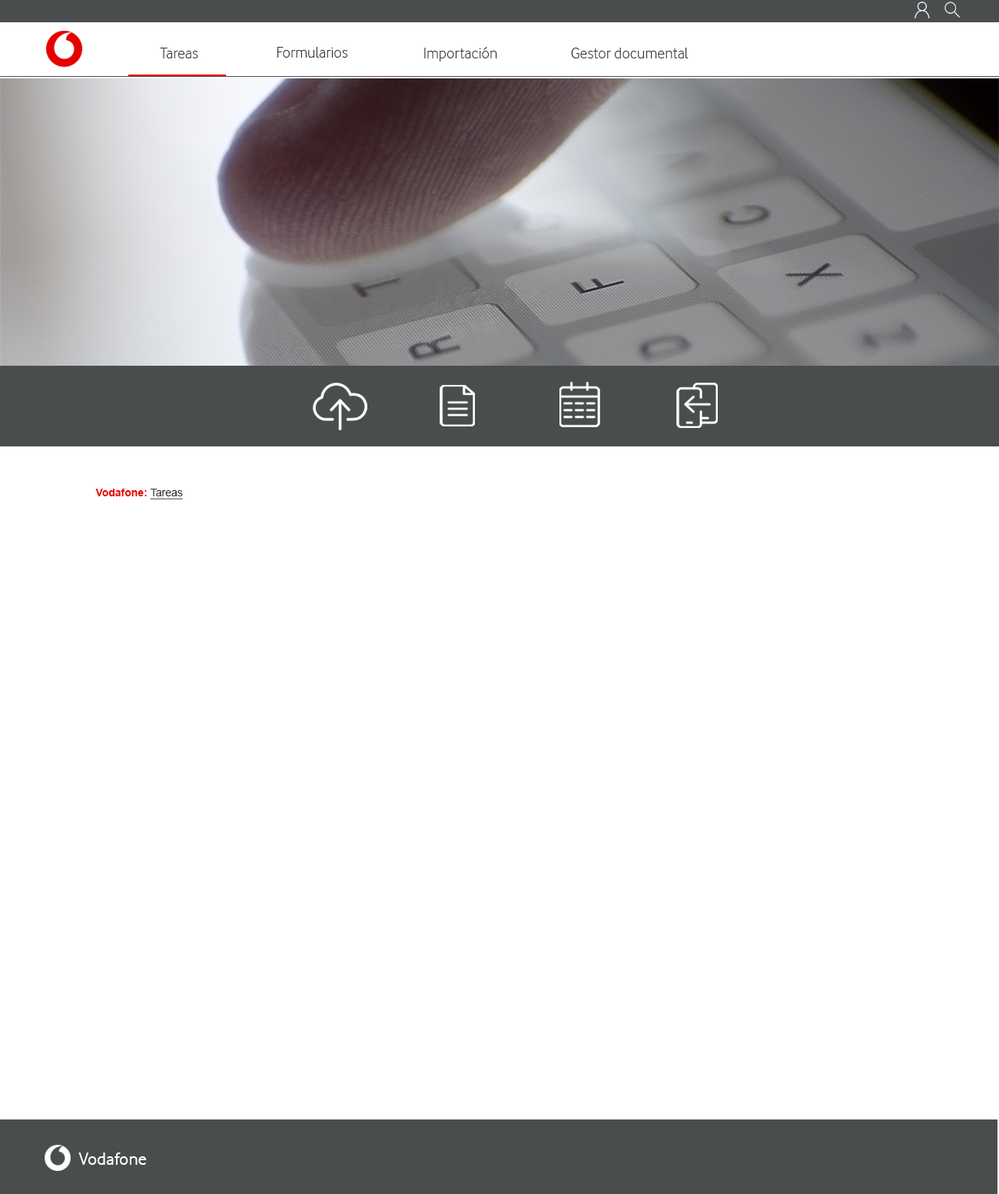
<style>
.page{position:relative;width:999px;height:1194px;background:#ffffff}
.page>*{position:absolute;margin:0}
.t1{font:16.1px "VodafoneLt-Regular";color:#333333}
.t2{font:10.8px "Arial-BoldMT";color:#e60000}
.t3{font:10.8px "ArialMT";color:#333333;text-decoration:underline}
.t4{font:18.4px "VodafoneRg-Regular";color:#ffffff}
</style>
<div class="page">
<p class="t1" style="left:160px;top:48px;width:38px;height:10px">Tareas</p>
<p class="t1" style="left:277px;top:47px;width:71px;height:11px">Formularios</p>
<p class="t1" style="left:424px;top:47px;width:73px;height:14px">Importación</p>
<p class="t1" style="left:571px;top:48px;width:117px;height:10px">Gestor documental</p>
<p class="t2" style="left:95px;top:489px;width:88px;height:10px">Vodafone: <span class="t3">Tareas</span></p>
<p class="t4" style="left:78px;top:1152px;width:69px;height:13px">Vodafone</p>
</div>
